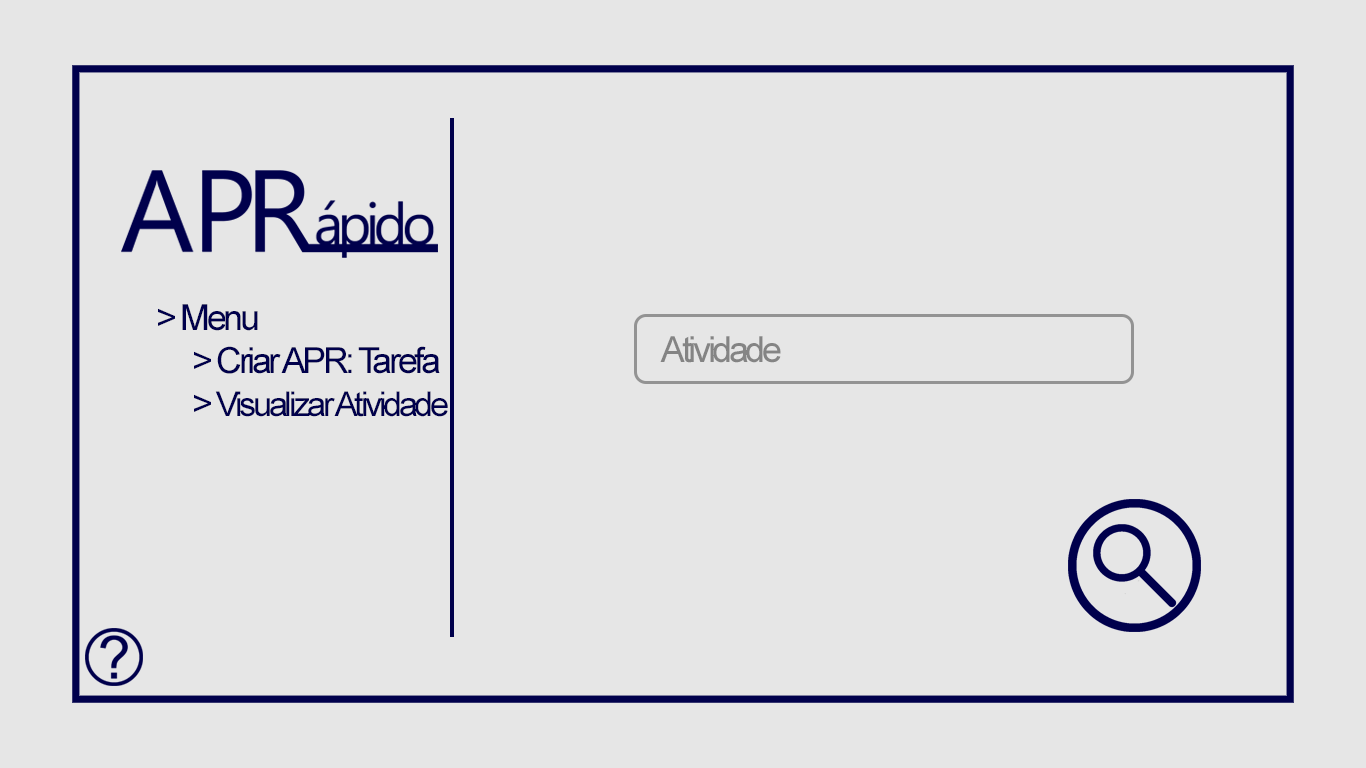
<style>
.page{position:relative;width:1366px;height:768px;background:#e6e6e6}
.page>*{position:absolute;margin:0}
.t1{font:36px "ArialMT";letter-spacing:-0.095em;color:#00004c}
.t2{font:34px "ArialMT";letter-spacing:-0.095em;color:#00004c}
.t3{font:36px "ArialMT";letter-spacing:-0.095em;color:#848484}
</style>
<div class="page">
<p class="t1" style="left:158px;top:304px;width:290px;height:113px">&gt; Menu<br> &gt; Criar APR: Tarefa<br> &gt; <span class="t2">Visualizar Atividade</span></p>
<p class="t3" style="left:660px;top:336px;width:121px;height:27px">Atividade</p>
</div>
